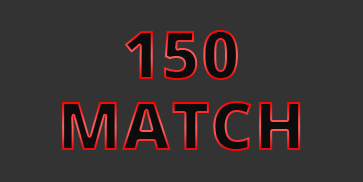
<style>
.page{position:relative;width:363px;height:182px;background:#333333}
.page>*{position:absolute;margin:0}
.t1{font:67px "OpenSans-Extrabold"}
</style>
<div class="page">
<p class="t1" style="left:124px;top:30px;width:114px;height:50px">150</p>
<p class="t1" style="left:62px;top:101px;width:239px;height:50px">MATCH</p>
</div>
